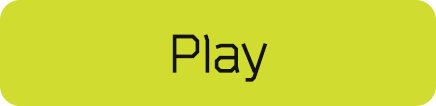
<style>
.page{position:relative;width:436px;height:106px;background:#d1dc30}
.page>*{position:absolute;margin:0}
.t1{font:54px "Bender";color:#141313}
</style>
<div class="page">
<p class="t1" style="left:172px;top:34px;width:96px;height:48px">Play</p>
</div>
